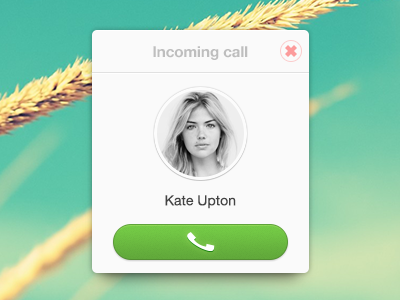
<style>
.page{position:relative;width:400px;height:300px;background:#fafafa}
.page>*{position:absolute;margin:0}
.t1{font:15px "HelveticaNeue-Bold";color:#bebebe}
.t2{font:14px "HelveticaNeue";color:#434343}
</style>
<div class="page">
<p class="t1" style="left:153px;top:46px;width:95px;height:14px">Incoming call</p>
<p class="t2" style="left:165px;top:195px;width:71px;height:14px">Kate Upton</p>
</div>
